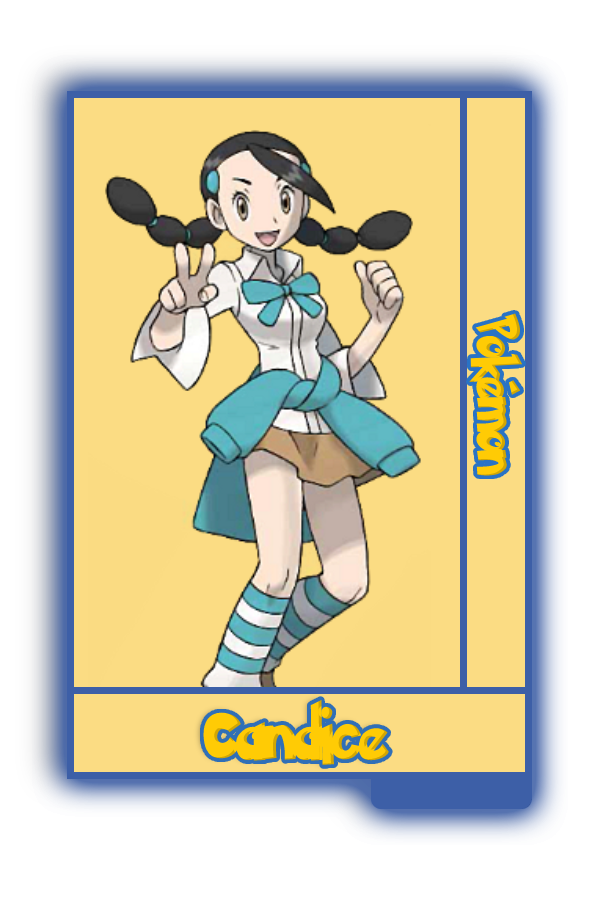
<style>
.page{position:relative;width:600px;height:900px;background:#fbdc83}
.page>*{position:absolute;margin:0}
.t1{font:48.8px "PokemonSolidNormal";color:#ffcb05;scale:0.8 1}
.t2{font:56.6px "PokemonSolidNormal";color:#ffcb05;scale:0.92 1}
</style>
<div class="page">
<p class="t1" style="left:469px;top:313px;width:54px;height:163px;rotate:90deg">Pokémon</p>
<p class="t2" style="left:203px;top:699px;width:186px;height:66px">Candice</p>
</div>
